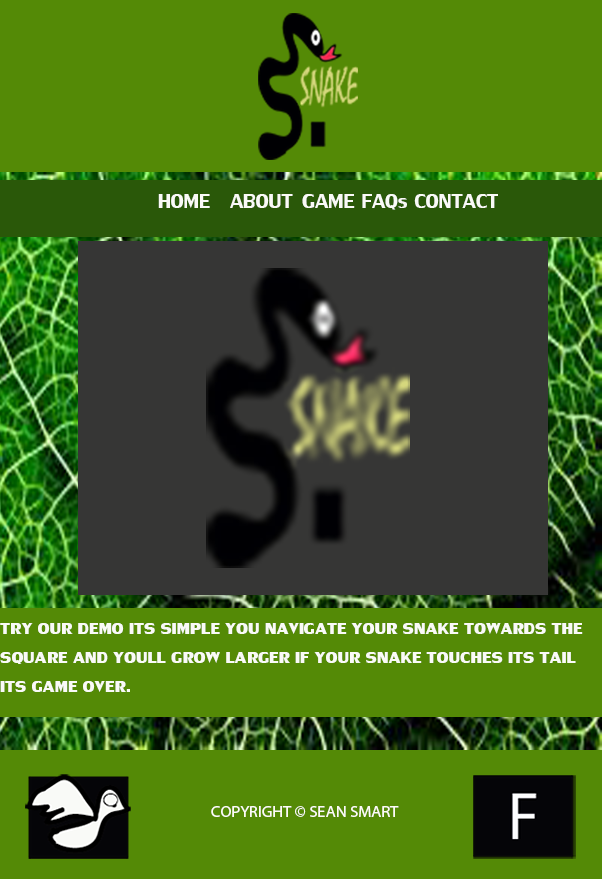
<style>
.page{position:relative;width:602px;height:879px;background:#548a06}
.page>*{position:absolute;margin:0}
.t1{font:30px "LilyUPC";color:#fafaf7}
.t2{font:24px "LilyUPCBold";color:#fafaf7}
.t3{font:16.4px "MyriadPro-Regular";color:#fefcf7}
</style>
<div class="page">
<p class="t1" style="left:158px;top:194px;width:340px;height:16px">HOME ABOUT GAME FAQs CONTACT</p>
<p class="t2" style="left:0px;top:623px;width:583px;height:69px">TRY OUR DEMO ITS SIMPLE YOU NAVIGATE YOUR SNAKE TOWARDS THE<br>SQUARE AND YOULL GROW LARGER IF YOUR SNAKE TOUCHES ITS TAIL<br>ITS GAME OVER.</p>
<p class="t3" style="left:211px;top:806px;width:188px;height:11px">COPYRIGHT © SEAN SMART</p>
</div>
